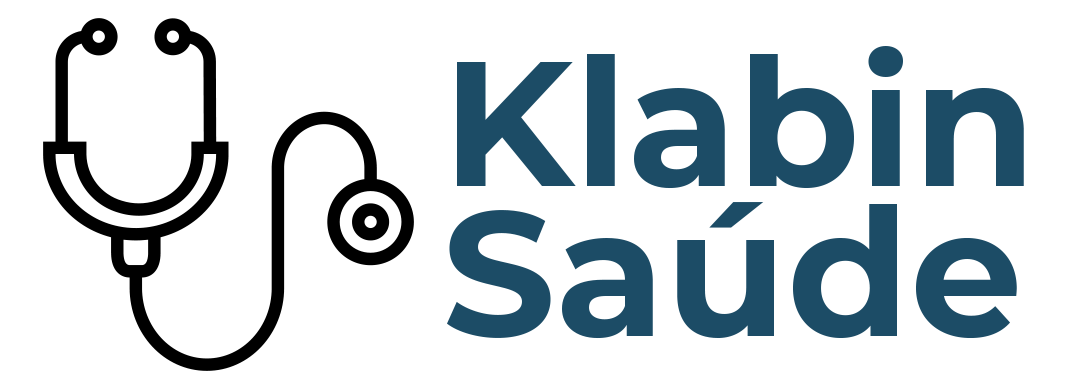
<style>
.page{position:relative;width:1073px;height:389px;background:#ffffff}
.page>*{position:absolute;margin:0}
.t1{font:177.8px/150px "Montserrat-Bold";color:#1c4c66}
</style>
<div class="page">
<p class="t1" style="left:447px;top:46px;width:577px;height:293px">Klabin<br>Saúde</p>
</div>
